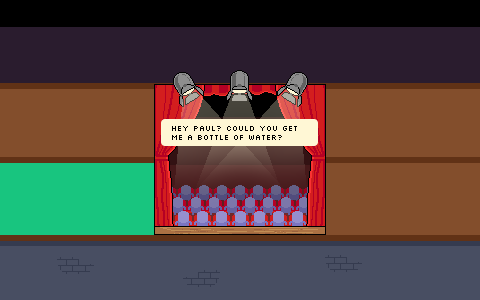
<style>
.page{position:relative;width:480px;height:300px;background:#834e2c}
.page>*{position:absolute;margin:0}
.t1{font:8px/9px "Silkscreen";color:#000000}
</style>
<div class="page">
<p class="t1" style="left:172px;top:126px;width:125px;height:14px">hey paul? Could you get<br>me a bottle of water?</p>
</div>
